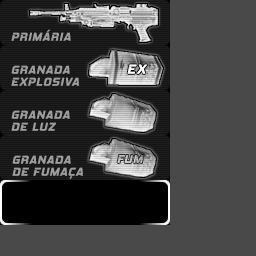
<style>
.page{position:relative;width:256px;height:256px;background:#494949}
.page>*{position:absolute;margin:0}
.t1{font:11.5px "HemiHeadRg-BoldItalic";letter-spacing:0.08em;color:#9d9d9d;text-transform:uppercase}
.t2{font:11.5px/12px "HemiHeadRg-BoldItalic";letter-spacing:0.08em;color:#9d9d9d;text-transform:uppercase}
.t3{font:13.6px "HemiHeadRg-BoldItalic";letter-spacing:0.08em;color:#ffffff;text-transform:uppercase}
.t4{font:11.5px "HemiHeadRg-BoldItalic";letter-spacing:0.08em;color:#bcbcbc;text-transform:uppercase}
</style>
<div class="page">
<p class="t1" style="left:11px;top:29px;width:60px;height:12px">pRIMÁRIA</p>
<p class="t2" style="left:11px;top:65px;width:68px;height:21px">GRANADA<br>EXPLOSIVA</p>
<p class="t3" style="left:127px;top:64px;width:21px;height:10px">EX</p>
<p class="t2" style="left:11px;top:110px;width:59px;height:21px">granada<br>de luz</p>
<p class="t2" style="left:12px;top:155px;width:71px;height:24px">granada <br>de fumaça</p>
<p class="t4" style="left:117px;top:155px;width:27px;height:8px">FUM</p>
</div>
